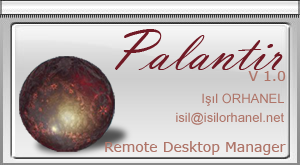
<style>
.page{position:relative;width:300px;height:165px}
.page>*{position:absolute;margin:0}
.t1{font:60px "VladimirScript";color:#711a25}
.t2{font:14px "Verdana";color:#af7569}
.t3{font:13px/19px "ArialMT";color:#af7569}
</style>
<div class="page">
<p class="t1" style="left:115px;top:29px;width:168px;height:41px">Palantir</p>
<p class="t2" style="left:248px;top:71px;width:38px;height:10px">V 1.0</p>
<p class="t3" style="left:176px;top:93px;width:108px;height:32px;text-align:right">Işıl ORHANEL<br>isil@isilorhanel.net</p>
<p class="t2" style="left:105px;top:141px;width:181px;height:14px">Remote Desktop Manager</p>
</div>
